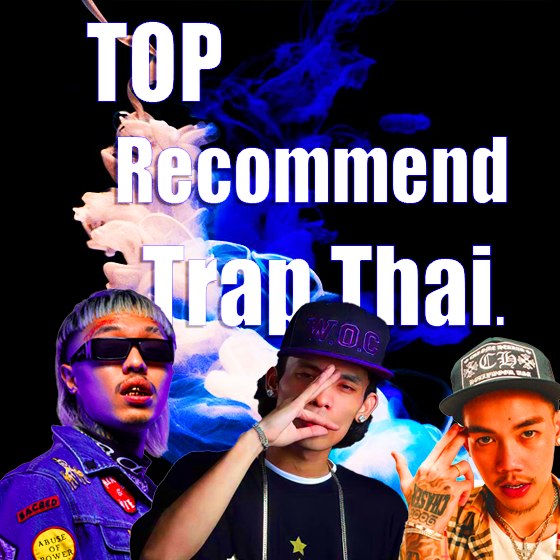
<style>
.page{position:relative;width:560px;height:560px}
.page>*{position:absolute;margin:0}
.t1{font:84.7px "Impact";color:#ffffff;scale:0.91 1}
.t2{font:100.8px "Impact";color:#ffffff;scale:0.91 1}
.t3{font:102.8px "Impact";color:#ffffff;scale:0.91 1}
.t4{font:61.7px "Impact";color:#ffffff;scale:0.91 1}
</style>
<div class="page">
<p class="t1" style="left:86px;top:21px;width:422px;height:315px"><span class="t2">TOP<br> </span>Recommend<br>  <span class="t3">Trap Thai</span><span class="t4">.</span></p>
</div>
